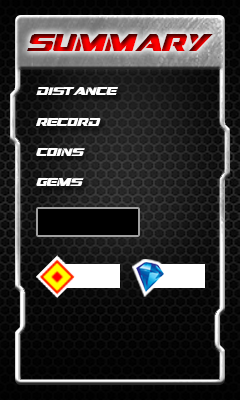
<style>
.page{position:relative;width:240px;height:400px}
.page>*{position:absolute;margin:0}
.t1{font:24px "DreamMMA"}
.t2{font:11px "DreamMMA";color:#ffffff}
</style>
<div class="page">
<p class="t1" style="left:27px;top:34px;width:186px;height:17px">summary</p>
<p class="t2" style="left:36px;top:87px;width:82px;height:8px">distance</p>
<p class="t2" style="left:36px;top:118px;width:65px;height:8px">record</p>
<p class="t2" style="left:36px;top:148px;width:49px;height:8px">coins</p>
<p class="t2" style="left:36px;top:178px;width:48px;height:8px">gems</p>
</div>
